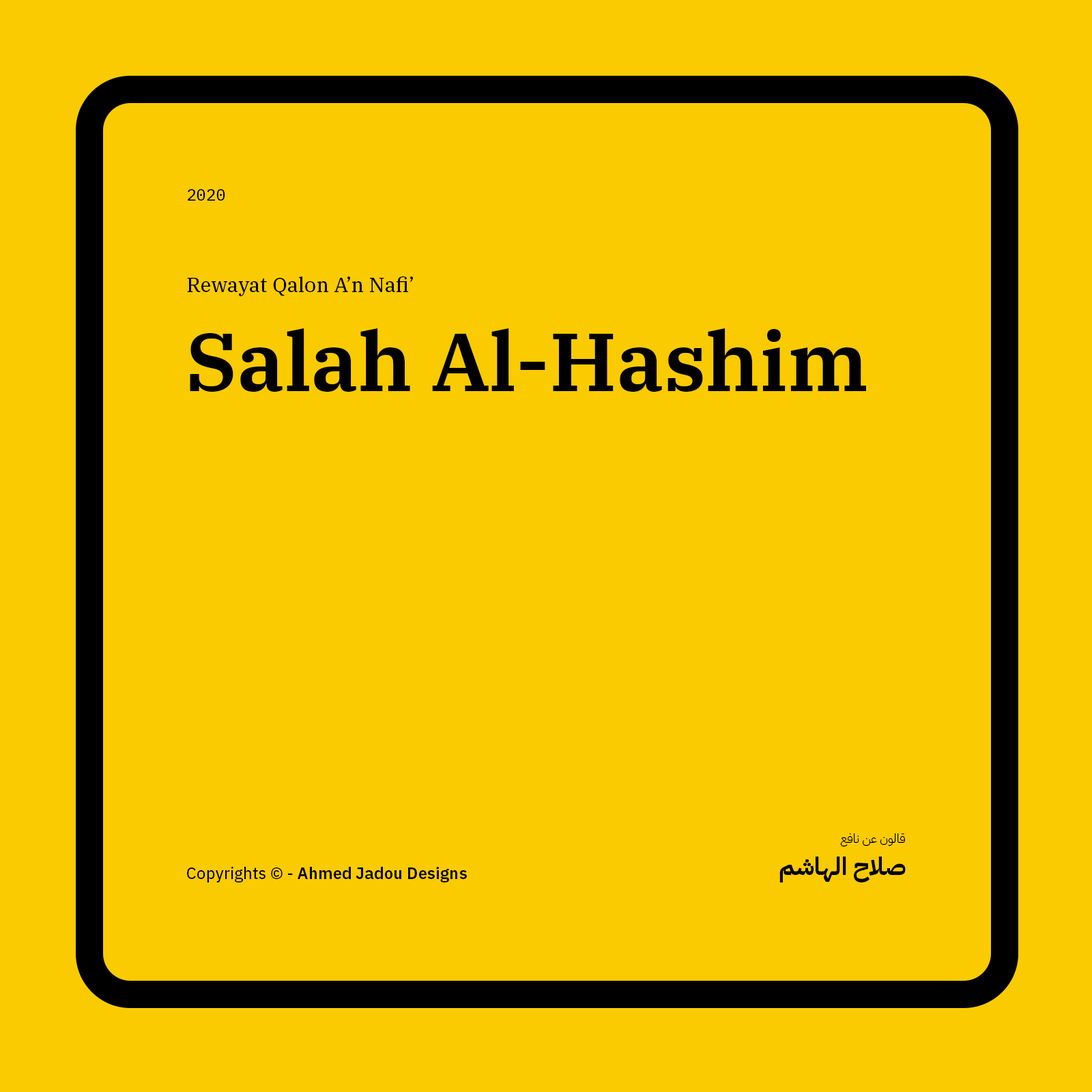
<style>
.page{position:relative;width:1092px;height:1092px;background:#facb00}
.page>*{position:absolute;margin:0}
.t1{font:16.4px "IBMPlexMono-Text";color:#000000}
.t2{font:20.5px "IBMPlexSerif-Text";color:#000000}
.t3{font:81.9px "IBMPlexSerif-SemiBold";color:#000000}
.t4{font:12.3px "IBMPlexArabic-Light";color:#000000}
.t5{font:24.6px "IBMPlexArabic-Bold";color:#000000}
.t6{font:16.4px "IBMPlexSans-SemiBold";color:#000000}
.t7{font:16.4px "IBMPlexSans-Text";color:#000000}
</style>
<div class="page">
<p class="t1" style="left:188px;top:189px;width:37px;height:12px">2020</p>
<p class="t2" style="left:187px;top:276px;width:226px;height:20px">Rewayat Qalon A’n Nafi’</p>
<p class="t3" style="left:190px;top:328px;width:676px;height:64px">Salah Al-Hashim</p>
<p class="t4" style="left:840px;top:833px;width:65px;height:14px">قالون عن نافع</p>
<p class="t5" style="left:779px;top:857px;width:127px;height:25px">صلاح الهاشم</p>
<p class="t6" style="left:187px;top:867px;width:280px;height:15px"><span class="t7">Copyrights © - </span>Ahmed Jadou Designs</p>
</div>
